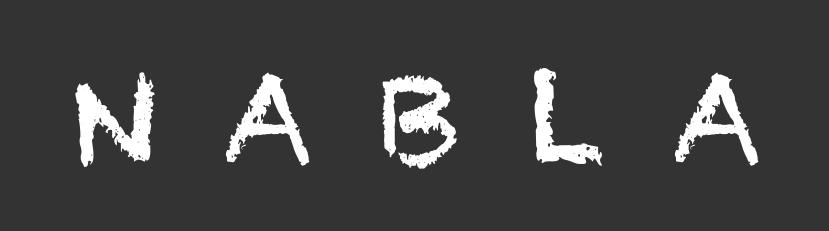
<style>
.page{position:relative;width:829px;height:231px;background:#333333}
.page>*{position:absolute;margin:0}
.t1{font:121.9px "Chalkduster";letter-spacing:0.55em;color:#ffffff}
</style>
<div class="page">
<p class="t1" style="left:75px;top:68px;width:684px;height:101px">NABLA</p>
</div>
